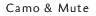
<style>
.page{position:relative;width:96px;height:16px;background:#ffffff}
.page>*{position:absolute;margin:0}
.t1{font:12px "Amira-Light";letter-spacing:0.1em;color:#333333}
</style>
<div class="page">
<p class="t1" style="left:6px;top:3px;width:83px;height:10px">Camo &amp; Mute</p>
</div>
